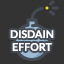
<style>
.page{position:relative;width:64px;height:64px;background:#333333}
.page>*{position:absolute;margin:0}
.t1{font:10.7px "Lato-Bold";color:#ffffff}
</style>
<div class="page">
<p class="t1" style="left:10px;top:30px;width:44px;height:21px;text-align:center">DISDAIN<br>EFFORT</p>
</div>
